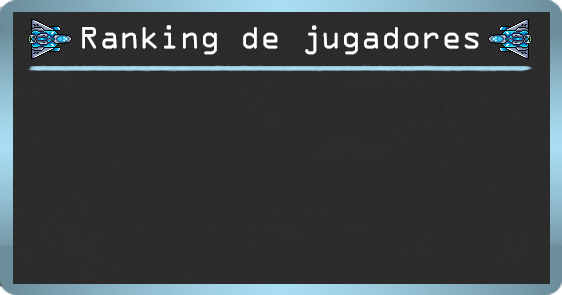
<style>
.page{position:relative;width:562px;height:295px;background:#2c2c2c}
.page>*{position:absolute;margin:0}
.t1{font:33.3px "OCRAExtended";color:#ffffff}
</style>
<div class="page">
<p class="t1" style="left:82px;top:25px;width:397px;height:30px">Ranking de jugadores</p>
</div>
